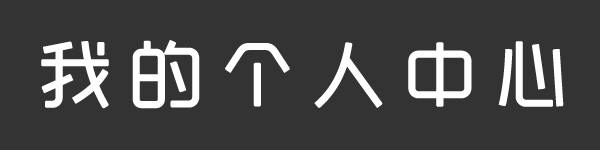
<style>
.page{position:relative;width:600px;height:150px;background:#333333}
.page>*{position:absolute;margin:0}
.t1{font:72px "RTWSYueGoDemo-Regular";letter-spacing:0.24em;color:#ffffff;font-weight:bold}
</style>
<div class="page">
<p class="t1" style="left:41px;top:39px;width:523px;height:70px">我的个人中心</p>
</div>
